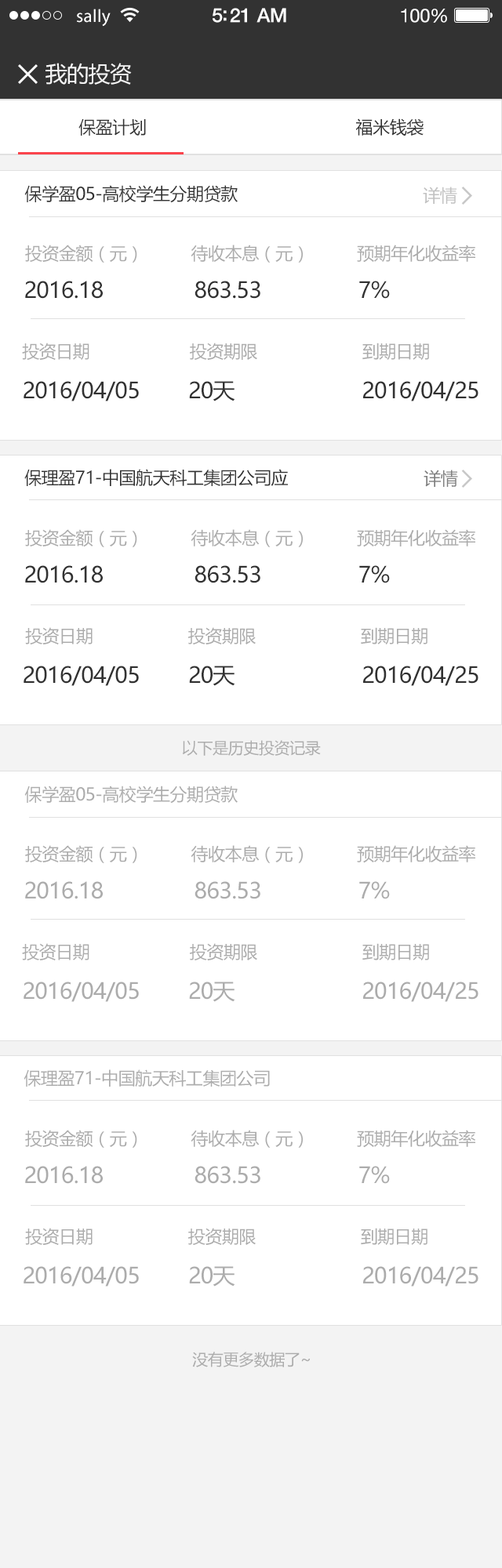
<style>
.page{position:relative;width:502px;height:1568px;background:#ffffff}
.page>*{position:absolute;margin:0}
.t1{font:18px "MyriadPro-Regular";letter-spacing:0.02em;color:#ffffff}
.t2{font:19.6px "HelveticaNeue-Medium";letter-spacing:-0.02em;color:#ffffff}
.t3{font:18.8px "HelveticaNeue";letter-spacing:-0.02em;color:#ffffff}
.t4{font:22px "MicrosoftYaHei";letter-spacing:-0.02em;color:#f3f3f3}
.t5{font:17.2px "MicrosoftYaHei";letter-spacing:-0.02em;color:#323232}
.t6{font:17.2px "MicrosoftYaHei";letter-spacing:-0.02em;color:#c1c1c1}
.t7{font:17.2px "MicrosoftYaHei";letter-spacing:-0.02em;color:#acacac}
.t8{font:22px "MicrosoftYaHei";letter-spacing:-0.02em;color:#323232}
.t9{font:17.2px "MicrosoftYaHei";letter-spacing:-0.02em;color:#7e7e7e}
.t10{font:15.7px "MicrosoftYaHei";letter-spacing:-0.02em;color:#acacac}
.t11{font:22px "MicrosoftYaHei";letter-spacing:-0.02em;color:#acacac}
</style>
<div class="page">
<p class="t1" style="left:77px;top:9px;width:34px;height:18px">sally</p>
<p class="t2" style="left:212px;top:8px;width:74px;height:15px">5:21 AM</p>
<p class="t3" style="left:401px;top:9px;width:46px;height:14px">100%</p>
<p class="t4" style="left:45px;top:63px;width:87px;height:22px">我的投资</p>
<p class="t5" style="left:78px;top:118px;width:345px;height:18px">保盈计划                                            福米钱袋</p>
<p class="t5" style="left:24px;top:185px;width:214px;height:18px">保学盈05-高校学生分期贷款</p>
<p class="t6" style="left:423px;top:187px;width:34px;height:17px">详情</p>
<p class="t7" style="left:25px;top:245px;width:450px;height:18px">投资金额（元）          待收本息（元）          预期年化收益率</p>
<p class="t8" style="left:25px;top:281px;width:365px;height:18px">2016.18               863.53                7%</p>
<p class="t7" style="left:22px;top:343px;width:407px;height:17px">投资日期                     投资期限                      到期日期</p>
<p class="t8" style="left:24px;top:381px;width:454px;height:20px">2016/04/05        20天                     2016/04/25</p>
<p class="t5" style="left:24px;top:469px;width:264px;height:17px">保理盈71-中国航天科工集团公司应</p>
<p class="t9" style="left:423px;top:470px;width:35px;height:17px">详情</p>
<p class="t7" style="left:25px;top:529px;width:450px;height:18px">投资金额（元）          待收本息（元）          预期年化收益率</p>
<p class="t8" style="left:25px;top:565px;width:365px;height:18px">2016.18               863.53                7%</p>
<p class="t7" style="left:25px;top:627px;width:402px;height:17px">投资日期                    投资期限                      到期日期</p>
<p class="t8" style="left:24px;top:666px;width:454px;height:20px">2016/04/05        20天                     2016/04/25</p>
<p class="t10" style="left:182px;top:740px;width:139px;height:16px">以下是历史投资记录</p>
<p class="t7" style="left:24px;top:786px;width:214px;height:18px">保学盈05-高校学生分期贷款</p>
<p class="t7" style="left:25px;top:845px;width:450px;height:18px">投资金额（元）          待收本息（元）          预期年化收益率</p>
<p class="t11" style="left:25px;top:881px;width:365px;height:18px">2016.18               863.53                7%</p>
<p class="t7" style="left:22px;top:943px;width:407px;height:17px">投资日期                     投资期限                      到期日期</p>
<p class="t11" style="left:24px;top:982px;width:454px;height:20px">2016/04/05        20天                     2016/04/25</p>
<p class="t7" style="left:24px;top:1069px;width:246px;height:18px">保理盈71-中国航天科工集团公司</p>
<p class="t7" style="left:25px;top:1130px;width:450px;height:18px">投资金额（元）          待收本息（元）          预期年化收益率</p>
<p class="t11" style="left:25px;top:1166px;width:365px;height:18px">2016.18               863.53                7%</p>
<p class="t7" style="left:25px;top:1228px;width:402px;height:17px">投资日期                    投资期限                      到期日期</p>
<p class="t11" style="left:24px;top:1266px;width:454px;height:21px">2016/04/05        20天                     2016/04/25</p>
<p class="t10" style="left:192px;top:1352px;width:118px;height:15px">没有更多数据了~</p>
</div>
